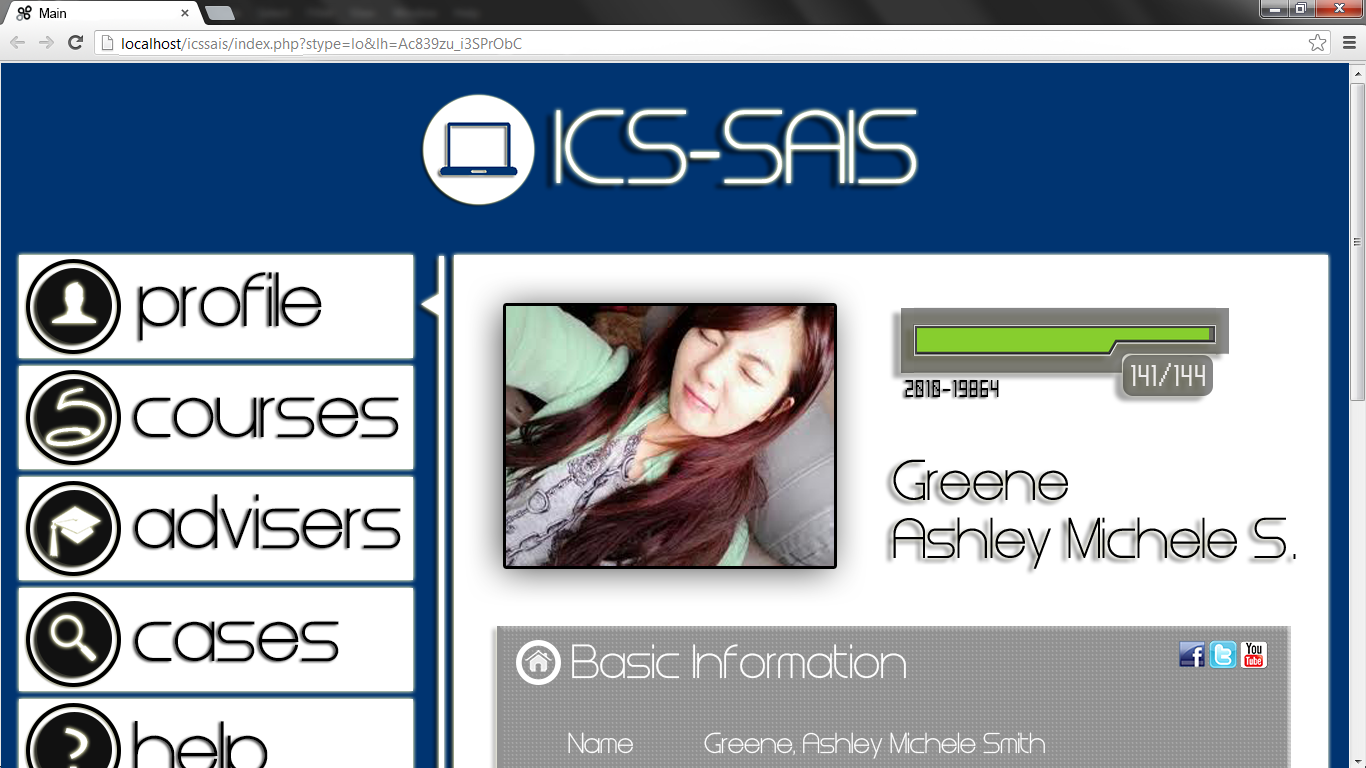
<style>
.page{position:relative;width:1366px;height:768px;background:#ffffff}
.page>*{position:absolute;margin:0}
.t1{font:12.7px "ArialMT";color:#000000}
.t2{font:64px "Steiner";color:#000000}
.t3{font:64px "LunaBar";color:#ffffff}
.t4{font:24px "Mecha";color:#000000}
.t5{font:40px "Steiner";color:#fefefe}
.t6{font:24px "Steiner";color:#fefefe}
</style>
<div class="page">
<p class="t1" style="left:39px;top:8px;width:27px;height:10px">Main</p>
<p class="t2" style="left:139px;top:272px;width:183px;height:69px">profile</p>
<p class="t3" style="left:46px;top:388px;width:59px;height:58px">5</p>
<p class="t4" style="left:905px;top:380px;width:94px;height:17px">2010-19864</p>
<p class="t2" style="left:133px;top:397px;width:266px;height:40px">courses</p>
<p class="t2" style="left:135px;top:494px;width:266px;height:54px">advisers</p>
<p class="t2" style="left:134px;top:621px;width:205px;height:40px">cases</p>
<p class="t5" style="left:572px;top:644px;width:334px;height:35px">Basic Information</p>
<p class="t6" style="left:568px;top:732px;width:65px;height:22px">Name</p>
<p class="t6" style="left:704px;top:732px;width:341px;height:27px">Greene, Ashley Michele Smith</p>
</div>
